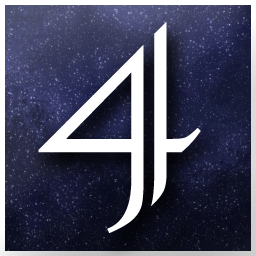
<style>
.page{position:relative;width:256px;height:256px}
.page>*{position:absolute;margin:0}
.t1{font:333px "ColonnaMT";color:#ffffff}
</style>
<div class="page">
<p class="t1" style="left:38px;top:21px;width:163px;height:212px">4</p>
</div>
